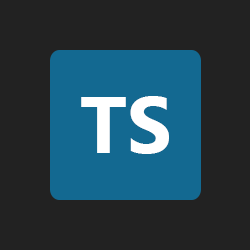
<style>
.page{position:relative;width:250px;height:250px;background:#222222}
.page>*{position:absolute;margin:0}
.t1{font:80px "MyanmarText-Bold";color:#ffffff}
</style>
<div class="page">
<p class="t1" style="left:81px;top:96px;width:88px;height:58px">TS</p>
</div>
